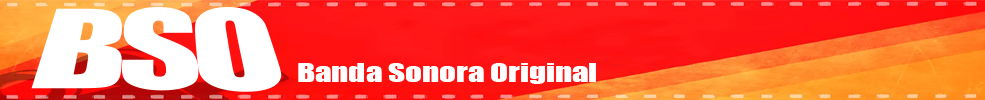
<style>
.page{position:relative;width:985px;height:100px}
.page>*{position:absolute;margin:0}
.t1{font:24px "Impact";color:#ffffff;scale:1.37 1}
</style>
<div class="page">
<p class="t1" style="left:298px;top:63px;width:298px;height:21px">Banda Sonora Original</p>
</div>
